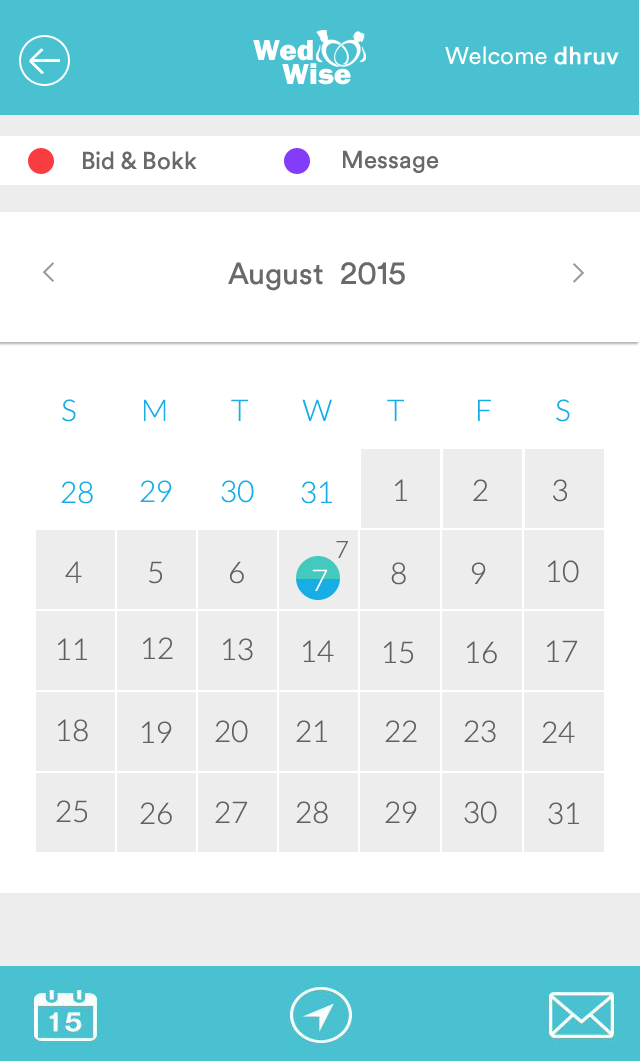
<style>
.page{position:relative;width:640px;height:1061px;background:#ffffff}
.page>*{position:absolute;margin:0}
.t1{font:30px "FranklinGothic-Heavy";color:#ffffff}
.t2{font:24px "CircularAir-Book";color:#ffffff}
.t3{font:24px "CircularAir-Book";color:#ffffff;font-weight:bold}
.t4{font:24px "CircularAir-Book";color:#69696a}
.t5{font:30px "CircularAir-Book";color:#69696a}
.t6{font:30px "Lato-Light";color:#18ade5;text-transform:uppercase}
.t7{font:30px "Lato-Light";letter-spacing:0.205em;color:#616162;text-transform:uppercase}
.t8{font:24px "Lato-Light";color:#616162;text-transform:uppercase}
.t9{font:30px "Lato-Light";color:#616162;text-transform:uppercase}
.t10{font:30px "Lato-Light";color:#ffffff;text-transform:uppercase}
</style>
<div class="page">
<p class="t1" style="left:253px;top:40px;width:60px;height:21px">Wed</p>
<p class="t2" style="left:445px;top:46px;width:174px;height:19px">Welcome <span class="t3">dhruv</span></p>
<p class="t1" style="left:282px;top:63px;width:69px;height:22px">Wise</p>
<p class="t4" style="left:343px;top:150px;width:96px;height:23px">Message</p>
<p class="t4" style="left:83px;top:151px;width:114px;height:19px">Bid &amp; Bokk</p>
<p class="t5" style="left:228px;top:262px;width:177px;height:29px">August  2015</p>
<p class="t6" style="left:62px;top:399px;width:508px;height:23px">s        M        T       W       T         F        S</p>
<p class="t6" style="left:61px;top:481px;width:32px;height:23px">28</p>
<p class="t6" style="left:140px;top:480px;width:32px;height:22px">29</p>
<p class="t6" style="left:221px;top:480px;width:33px;height:23px">30</p>
<p class="t6" style="left:301px;top:481px;width:31px;height:23px">31</p>
<p class="t7" style="left:395px;top:479px;width:172px;height:23px">1    2    3</p>
<p class="t8" style="left:336px;top:541px;width:12px;height:17px">7</p>
<p class="t9" style="left:65px;top:561px;width:17px;height:22px">4</p>
<p class="t9" style="left:149px;top:561px;width:13px;height:23px">5</p>
<p class="t9" style="left:230px;top:561px;width:14px;height:23px">6</p>
<p class="t10" style="left:312px;top:569px;width:16px;height:22px">7</p>
<p class="t9" style="left:391px;top:562px;width:15px;height:23px">8</p>
<p class="t9" style="left:471px;top:562px;width:15px;height:22px">9</p>
<p class="t9" style="left:548px;top:560px;width:31px;height:23px">10</p>
<p class="t9" style="left:58px;top:638px;width:29px;height:22px">11</p>
<p class="t9" style="left:143px;top:637px;width:30px;height:22px">12</p>
<p class="t9" style="left:223px;top:638px;width:30px;height:23px">13</p>
<p class="t9" style="left:303px;top:640px;width:31px;height:22px">14</p>
<p class="t9" style="left:384px;top:641px;width:29px;height:23px">15</p>
<p class="t9" style="left:467px;top:641px;width:30px;height:23px">16</p>
<p class="t9" style="left:547px;top:640px;width:31px;height:22px">17</p>
<p class="t9" style="left:58px;top:719px;width:30px;height:23px">18</p>
<p class="t9" style="left:142px;top:721px;width:30px;height:22px">19</p>
<p class="t9" style="left:215px;top:720px;width:33px;height:23px">20</p>
<p class="t9" style="left:296px;top:720px;width:31px;height:22px">21</p>
<p class="t9" style="left:385px;top:720px;width:32px;height:22px">22</p>
<p class="t9" style="left:464px;top:720px;width:32px;height:23px">23</p>
<p class="t9" style="left:542px;top:721px;width:33px;height:22px">24</p>
<p class="t9" style="left:56px;top:800px;width:31px;height:23px">25</p>
<p class="t9" style="left:140px;top:802px;width:32px;height:23px">26</p>
<p class="t9" style="left:215px;top:801px;width:33px;height:22px">27</p>
<p class="t9" style="left:296px;top:801px;width:32px;height:23px">28</p>
<p class="t9" style="left:385px;top:801px;width:32px;height:22px">29</p>
<p class="t9" style="left:464px;top:801px;width:33px;height:23px">30</p>
<p class="t9" style="left:548px;top:802px;width:31px;height:23px">31</p>
</div>
